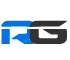
<style>
.page{position:relative;width:70px;height:60px;background:#ffffff}
.page>*{position:absolute;margin:0}
.t1{font:48px "DriveLaser";color:#0074e1;scale:0.76 1}
.t2{font:48px "DriveLaser";color:#333333;scale:0.84 1}
</style>
<div class="page">
<p class="t1" style="left:1px;top:20px;width:35px;height:24px">r</p>
<p class="t2" style="left:29px;top:20px;width:38px;height:24px">g</p>
</div>
